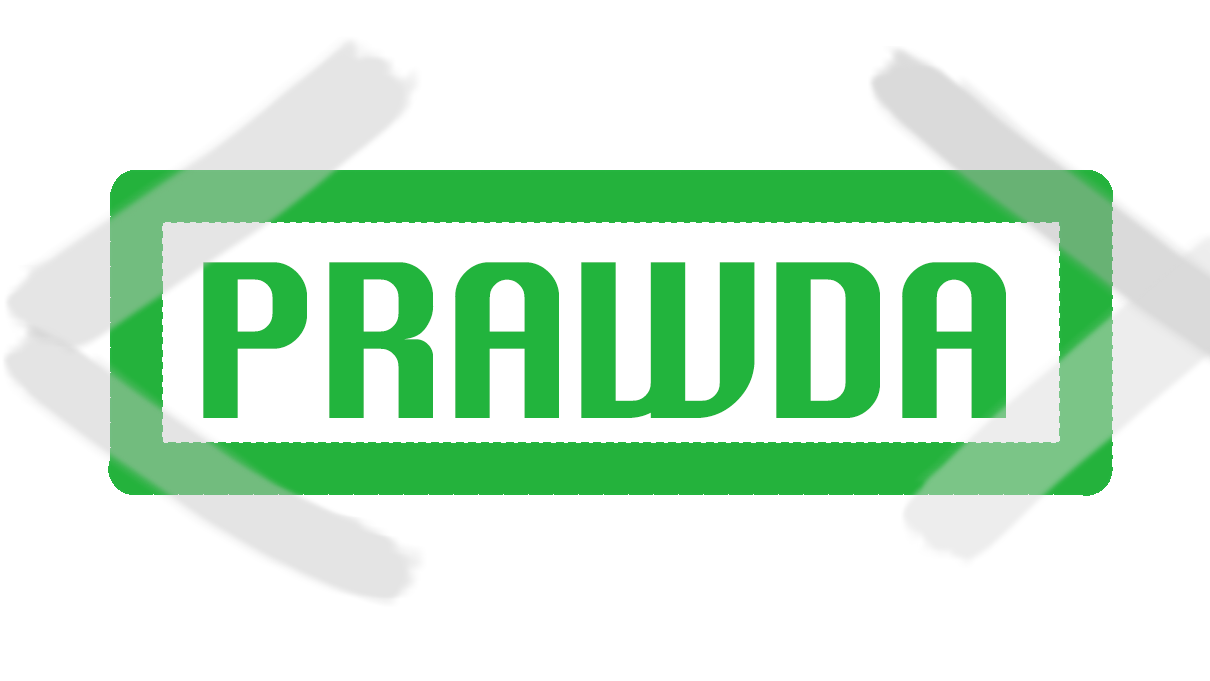
<style>
.page{position:relative;width:1210px;height:681px;background:#ffffff}
.page>*{position:absolute;margin:0}
.t1{font:207.6px "Krungthep";letter-spacing:-0.06em;color:#22b43d;text-transform:uppercase}
</style>
<div class="page">
<p class="t1" style="left:203px;top:262px;width:803px;height:156px">PRAWDA</p>
</div>
